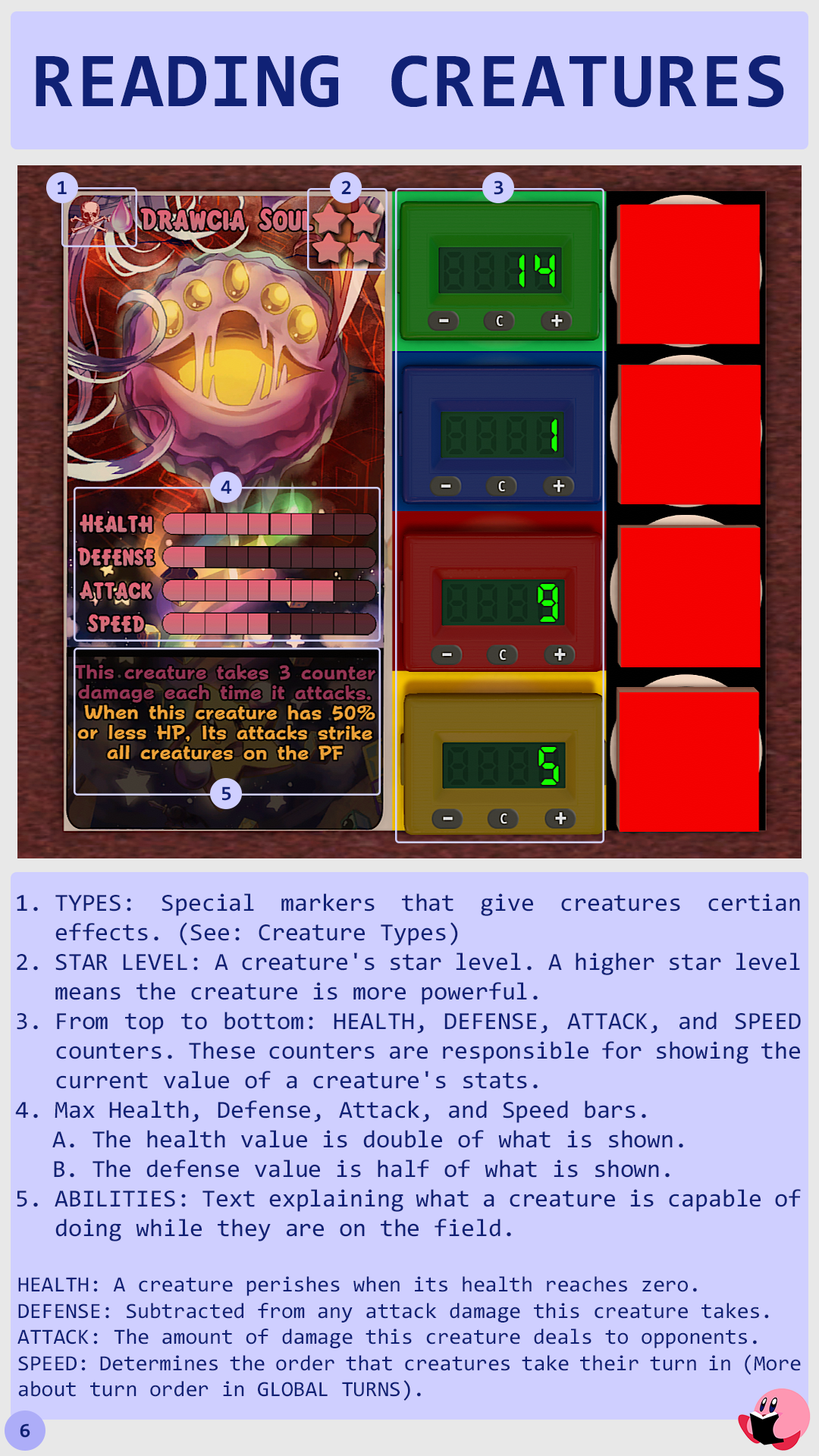
<style>
.page{position:relative;width:819px;height:1456px;background:#cfcfff}
.page>*{position:absolute;margin:0}
.t1{font:78.3px "Consolas-Bold";letter-spacing:0.02em;color:#102175}
.t2{font:20.5px "Consolas-Bold";color:#102175}
.t3{font:24.6px "Consolas";color:#102175}
.t4{font:21.8px "Consolas";color:#102175}
.t5{font:20.5px "Consolas-Bold";letter-spacing:-0.06em;color:#102175}
</style>
<div class="page">
<p class="t1" style="left:36px;top:55px;width:748px;height:53px">READING CREATURES</p>
<p class="t2" style="left:57px;top:180px;width:10px;height:14px">1</p>
<p class="t2" style="left:341px;top:180px;width:10px;height:14px">2</p>
<p class="t2" style="left:494px;top:180px;width:10px;height:15px">3</p>
<p class="t2" style="left:221px;top:480px;width:11px;height:14px">4</p>
<p class="t2" style="left:222px;top:786px;width:9px;height:15px">5</p>
<p class="t3" style="left:15px;top:893px;width:786px;height:508px;text-align:justify">TYPES: Special markers that give creatures certian effects. (See: Creature Types)<br>STAR LEVEL: A creature's star level. A higher star level means the creature is more powerful. <br>From top to bottom: HEALTH, DEFENSE, ATTACK, and SPEED counters. These counters are responsible for showing the current value of a creature's stats.<br>Max Health, Defense, Attack, and Speed bars. <br>The health value is double of what is shown.<br>The defense value is half of what is shown.<br>ABILITIES: Text explaining what a creature is capable of doing while they are on the field. <br><br><span class="t4">HEALTH: A creature perishes when its health reaches zero.<br>DEFENSE: Subtracted from any attack damage this creature takes.<br>ATTACK: The amount of damage this creature deals to opponents.<br>SPEED: Determines the order that creatures take their turn in (More about turn order in GLOBAL TURNS).</span></p>
<p class="t5" style="left:20px;top:1423px;width:10px;height:15px">6</p>
</div>
